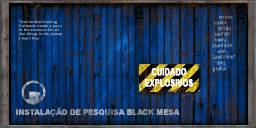
<style>
.page{position:relative;width:256px;height:128px}
.page>*{position:absolute;margin:0}
.t1{font:10px "Arial-BoldMT";letter-spacing:0.01em;color:#ffffff;font-weight:bold;scale:0.71 1}
.t2{font:8px "Arial-Black";scale:0.9 1}
</style>
<div class="page">
<p class="t1" style="left:145px;top:68px;width:48px;height:19px;text-align:center">CUIDADO<br>EXPLOSIVOS</p>
<p class="t2" style="left:16px;top:107px;width:164px;height:10px">INSTALAÇÃO DE PESQUISA BLACK MESA</p>
</div>
